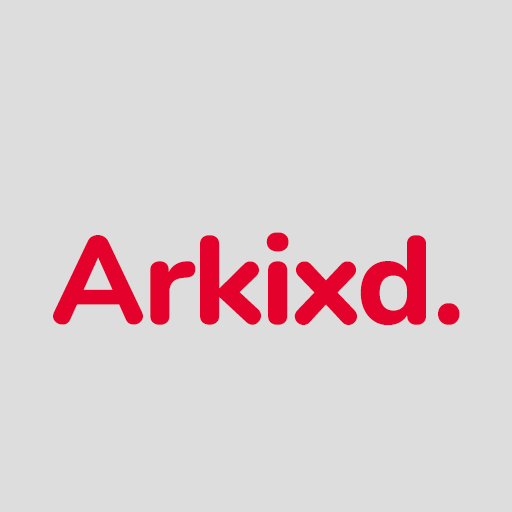
<style>
.page{position:relative;width:512px;height:512px;background:#dddddd}
.page>*{position:absolute;margin:0}
.t1{font:125px "Nunito-ExtraBold";color:#e4022d}
</style>
<div class="page">
<p class="t1" style="left:53px;top:232px;width:407px;height:93px">Arkixd.</p>
</div>
